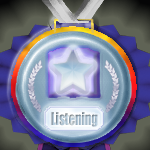
<style>
.page{position:relative;width:150px;height:150px}
.page>*{position:absolute;margin:0}
.t1{font:16.1px "Impact";color:#a9bdcc;scale:0.77 1}
</style>
<div class="page">
<p class="t1" style="left:51px;top:112px;width:47px;height:15px">Listening</p>
</div>
